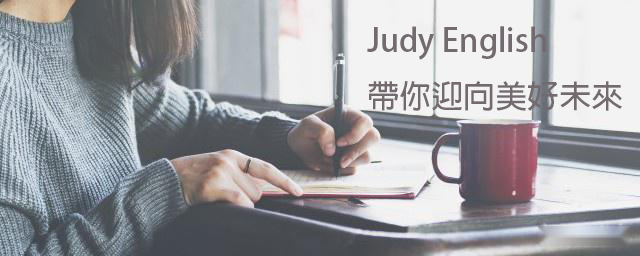
<style>
.page{position:relative;width:640px;height:256px}
.page>*{position:absolute;margin:0}
.t1{font:32px "AdobeFanHeitiStd-Bold";color:#736a6f}
</style>
<div class="page">
<p class="t1" style="left:367px;top:26px;width:255px;height:85px">Judy English<br>帶你迎向美好未來</p>
</div>
